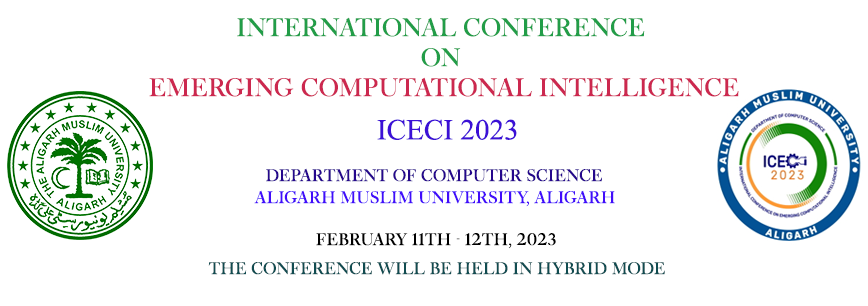
<style>
.page{position:relative;width:868px;height:306px;background:#ffffff}
.page>*{position:absolute;margin:0}
.t1{font:25px "CradleyTitle-Regular2";color:#cc284f}
.t2{font:25px "CradleyTitle-Regular2";color:#229d48}
.t3{font:29.2px "TimesNewRomanPSMT";color:#3c10d6}
.t4{font:16.7px "CradleyTitle-Regular2";color:#25078c}
.t5{font:16.7px "CradleyTitle-Regular2";color:#410cfa}
.t6{font:16.7px "CradleyTitle-Regular2";color:#000000}
.t7{font:16.7px "CradleyTitle-Regular2";color:#114c51}
</style>
<div class="page">
<p class="t1" style="left:149px;top:17px;width:590px;height:80px;text-align:center"><span class="t2">International Conference <br>on <br></span>Emerging Computational Intelligence</p>
<p class="t3" style="left:377px;top:119px;width:140px;height:21px">ICECI 2023</p>
<p class="t4" style="left:266px;top:168px;width:336px;height:14px">Department of Computer Science</p>
<p class="t5" style="left:254px;top:190px;width:361px;height:17px">Aligarh Muslim University, Aligarh</p>
<p class="t6" style="left:316px;top:232px;width:240px;height:17px">February 11th - 12th, 2023</p>
<p class="t7" style="left:208px;top:262px;width:457px;height:13px">The conference will be held in hybrid mode</p>
</div>
